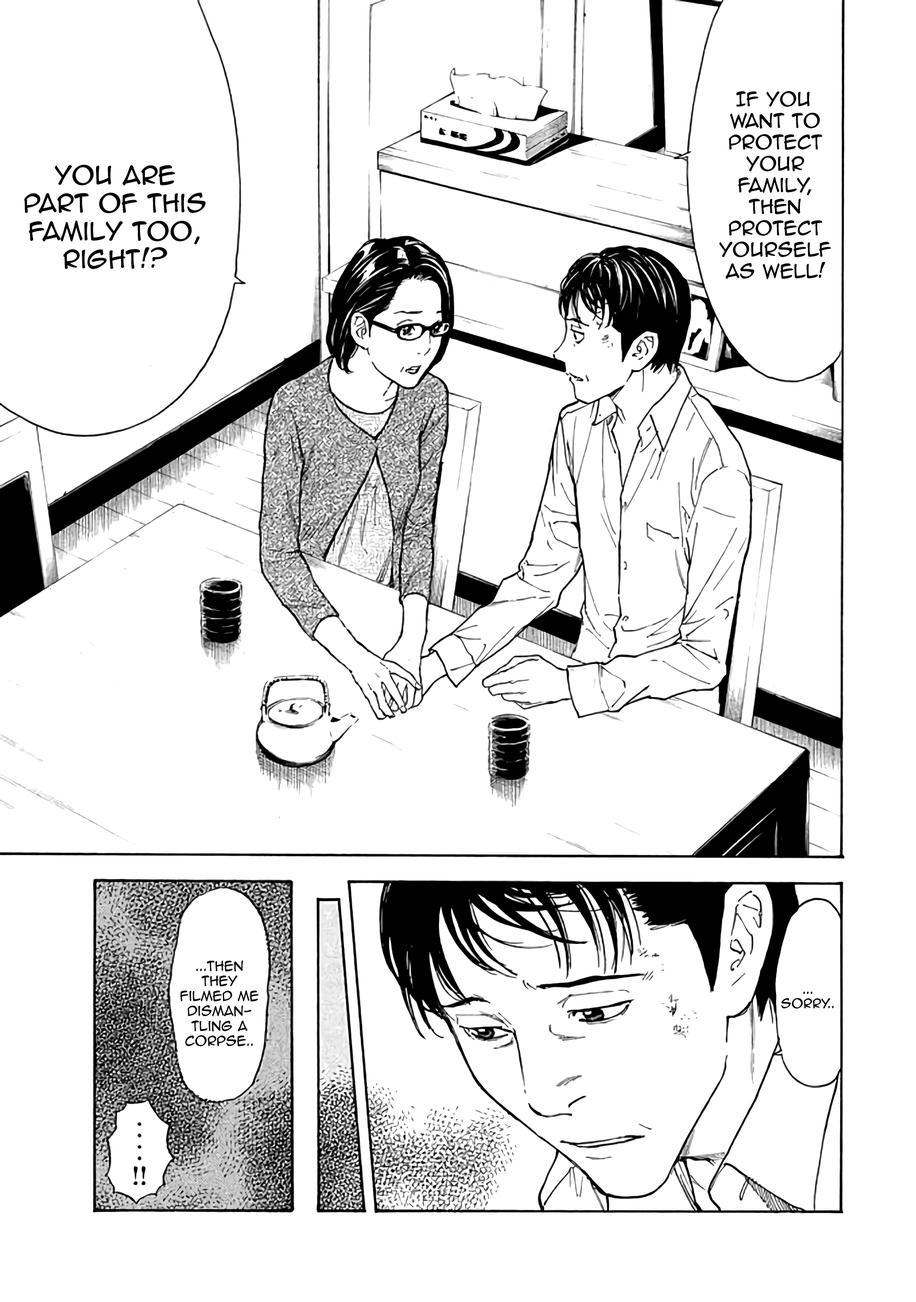
<style>
.page{position:relative;width:916px;height:1302px;background:#ffffff}
.page>*{position:absolute;margin:0}
.t1{font:17.9px "AnimeAce2.0BB";color:#000000}
.t2{font:23.3px "AnimeAce2.0BB";color:#000000}
.t3{font:12.5px "AnimeAce2.0BB";color:#000000}
.t4{font:11.9px "AnimeAce2.0BB";color:#000000}
</style>
<div class="page">
<p class="t1" style="left:719px;top:91px;width:112px;height:188px;text-align:center">If you <br>want to protect your family, then <br>protect yourself as well!</p>
<p class="t2" style="left:24px;top:164px;width:182px;height:105px;text-align:center">You are part of this family too, right!?</p>
<p class="t3" style="left:180px;top:960px;width:79px;height:87px;text-align:center">...then <br>They <br>filmed me dismantling a corpse..</p>
<p class="t4" style="left:781px;top:992px;width:53px;height:17px;text-align:center">...<br>Sorry..</p>
</div>
